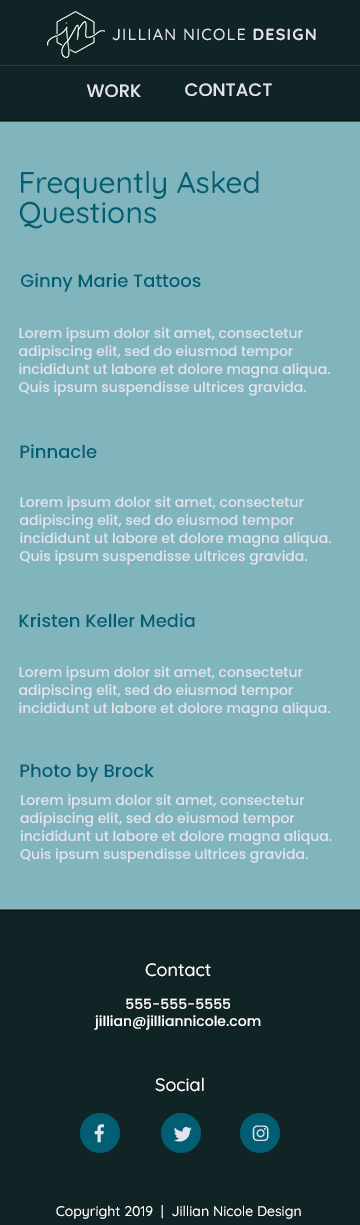
<style>
.page{position:relative;width:360px;height:1225px;background:#80b5be}
.page>*{position:absolute;margin:0}
.t1{font:16px "Quicksand-Medium";letter-spacing:0.075em;color:#e2e3ed}
.t2{font:16px "Quicksand-Bold";letter-spacing:0.075em;color:#e2e3ed}
.t3{font:18px "Poppins-Medium";color:#e2e3ed}
.t4{font:30px/30px "Quicksand-Medium";color:#025e73}
.t5{font:18px "Poppins-Medium";color:#025e73}
.t6{font:14px/18px "Poppins-Medium";color:#e2e3ed}
.t7{font:18px "Quicksand-Medium";color:#ffffff}
.t8{font:14px "Poppins-Medium";color:#ffffff}
.t9{font:14px "Quicksand-Medium";color:#ffffff}
</style>
<div class="page">
<p class="t1" style="left:112px;top:28px;width:204px;height:13px">JILLIAN NICOLE <span class="t2">DESIGN</span></p>
<p class="t3" style="left:86px;top:84px;width:55px;height:14px">WORK</p>
<p class="t3" style="left:185px;top:83px;width:87px;height:14px">CONTACT</p>
<p class="t4" style="left:19px;top:170px;width:240px;height:59px">Frequently Asked <br>Questions</p>
<p class="t5" style="left:21px;top:273px;width:180px;height:19px">Ginny Marie Tattoos</p>
<p class="t6" style="left:19px;top:327px;width:311px;height:69px">Lorem ipsum dolor sit amet, consectetur adipiscing elit, sed do eiusmod tempor incididunt ut labore et dolore magna aliqua. Quis ipsum suspendisse ultrices gravida.</p>
<p class="t5" style="left:20px;top:444px;width:77px;height:15px">Pinnacle</p>
<p class="t6" style="left:20px;top:496px;width:311px;height:69px">Lorem ipsum dolor sit amet, consectetur adipiscing elit, sed do eiusmod tempor incididunt ut labore et dolore magna aliqua. Quis ipsum suspendisse ultrices gravida.</p>
<p class="t5" style="left:19px;top:613px;width:176px;height:15px">Kristen Keller Media</p>
<p class="t6" style="left:19px;top:666px;width:311px;height:51px">Lorem ipsum dolor sit amet, consectetur adipiscing elit, sed do eiusmod tempor incididunt ut labore et dolore magna aliqua.</p>
<p class="t5" style="left:20px;top:763px;width:134px;height:19px">Photo by Brock</p>
<p class="t6" style="left:20px;top:794px;width:312px;height:69px">Lorem ipsum dolor sit amet, consectetur adipiscing elit, sed do eiusmod tempor incididunt ut labore et dolore magna aliqua. Quis ipsum suspendisse ultrices gravida.</p>
<p class="t7" style="left:145px;top:963px;width:66px;height:14px">Contact</p>
<p class="t8" style="left:94px;top:998px;width:167px;height:32px;text-align:center">555-555-5555<br>jillian@jilliannicole.com</p>
<p class="t7" style="left:155px;top:1077px;width:49px;height:15px">Social</p>
<p class="t9" style="left:56px;top:1205px;width:245px;height:14px">Copyright 2019  |  Jillian Nicole Design</p>
</div>
